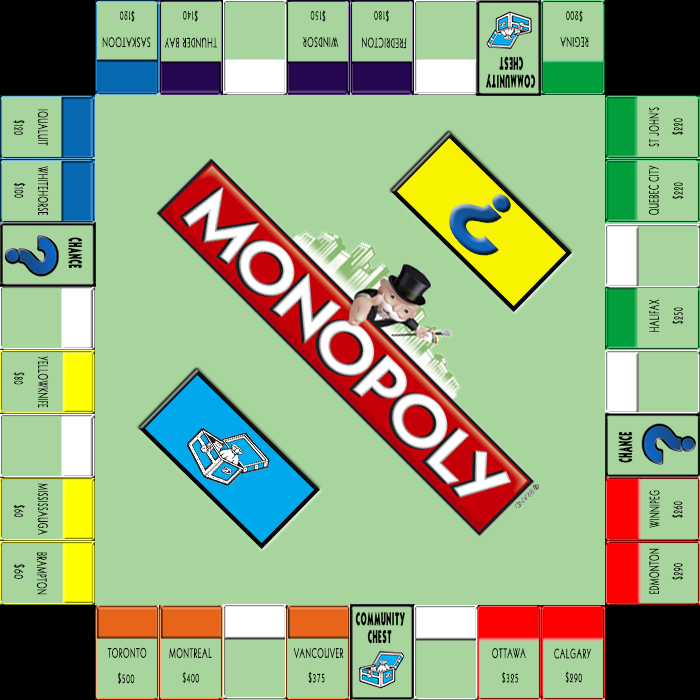
<style>
.page{position:relative;width:700px;height:700px;background:#a8d59d}
.page>*{position:absolute;margin:0}
.t1{font:13.1px "Kabel-Book";letter-spacing:0.1em;color:#000000;text-transform:uppercase;scale:0.56 1}
.t2{font:13.3px "Kabel-Book";letter-spacing:0.1em;color:#000000;text-transform:uppercase;scale:0.56 1}
.t3{font:13.4px "Kabel-Book";letter-spacing:0.1em;color:#000000;text-transform:uppercase;scale:0.56 1}
.t4{font:13.3px "Kabel-Book";letter-spacing:0.1em;color:#000000;text-transform:uppercase;scale:0.57 1}
.t5{font:13.1px "Kabel-Book";letter-spacing:0.1em;color:#000000;text-transform:uppercase;scale:0.57 1}
.t6{font:13.3px "Kabel-Book";letter-spacing:0.1em;color:#000000;text-transform:uppercase;scale:0.7 1}
</style>
<div class="page">
<p class="t1" style="left:120px;top:10px;width:15px;height:12px;rotate:-180deg">$120</p>
<p class="t2" style="left:183px;top:10px;width:15px;height:12px;rotate:-180deg">$140</p>
<p class="t2" style="left:310px;top:10px;width:16px;height:12px;rotate:180deg">$150</p>
<p class="t2" style="left:374px;top:10px;width:15px;height:12px;rotate:180deg">$180</p>
<p class="t2" style="left:566px;top:10px;width:17px;height:12px;rotate:180deg">$200</p>
<p class="t2" style="left:102px;top:37px;width:49px;height:11px;rotate:-180deg">Saskatoon</p>
<p class="t2" style="left:164px;top:37px;width:53px;height:11px;rotate:-180deg">Thunder Bay</p>
<p class="t2" style="left:303px;top:36px;width:36px;height:12px;rotate:180deg">Windsor</p>
<p class="t3" style="left:361px;top:37px;width:46px;height:12px;rotate:-179deg">Fredricton</p>
<p class="t2" style="left:560px;top:36px;width:29px;height:12px;rotate:180deg">Regina</p>
<p class="t2" style="left:37px;top:109px;width:11px;height:37px;rotate:90deg">Iqualuit</p>
<p class="t4" style="left:649px;top:107px;width:11px;height:40px;rotate:-90deg">St John's</p>
<p class="t2" style="left:13px;top:120px;width:12px;height:15px;rotate:90deg">$120</p>
<p class="t2" style="left:671px;top:118px;width:13px;height:17px;rotate:-90deg">$220</p>
<p class="t2" style="left:37px;top:166px;width:12px;height:50px;rotate:90deg">whitehorse</p>
<p class="t2" style="left:648px;top:165px;width:11px;height:50px;rotate:-90deg">Quebec City</p>
<p class="t2" style="left:13px;top:183px;width:13px;height:15px;rotate:90deg">$100</p>
<p class="t2" style="left:672px;top:182px;width:12px;height:17px;rotate:-90deg">$220</p>
<p class="t2" style="left:649px;top:299px;width:11px;height:33px;rotate:-90deg">Halifax</p>
<p class="t2" style="left:672px;top:307px;width:12px;height:17px;rotate:-90deg">$250</p>
<p class="t2" style="left:37px;top:356px;width:12px;height:52px;rotate:90deg">Yellowknife</p>
<p class="t2" style="left:13px;top:372px;width:12px;height:13px;rotate:90deg">$80</p>
<p class="t2" style="left:37px;top:483px;width:11px;height:52px;rotate:90deg">mississauga</p>
<p class="t2" style="left:649px;top:490px;width:11px;height:38px;rotate:-90deg">Winnipeg</p>
<p class="t2" style="left:13px;top:505px;width:12px;height:12px;rotate:90deg">$60</p>
<p class="t5" style="left:671px;top:501px;width:12px;height:17px;rotate:-90deg">$260</p>
<p class="t2" style="left:36px;top:552px;width:11px;height:43px;rotate:90deg">Brampton</p>
<p class="t2" style="left:649px;top:548px;width:11px;height:46px;rotate:-90deg">Edmonton</p>
<p class="t6" style="left:13px;top:564px;width:12px;height:15px;rotate:90deg">$60</p>
<p class="t2" style="left:671px;top:563px;width:13px;height:17px;rotate:-90deg">$290</p>
<p class="t2" style="left:107px;top:647px;width:40px;height:11px">Toronto</p>
<p class="t2" style="left:169px;top:648px;width:43px;height:11px">Montreal</p>
<p class="t2" style="left:293px;top:648px;width:51px;height:11px">Vancouver</p>
<p class="t2" style="left:492px;top:648px;width:34px;height:11px">Ottawa</p>
<p class="t2" style="left:554px;top:648px;width:37px;height:11px">Calgary</p>
<p class="t2" style="left:117px;top:672px;width:18px;height:12px">$500</p>
<p class="t2" style="left:182px;top:671px;width:17px;height:13px">$400</p>
<p class="t2" style="left:308px;top:671px;width:17px;height:13px">$375</p>
<p class="t2" style="left:502px;top:671px;width:17px;height:13px">$325</p>
<p class="t2" style="left:565px;top:671px;width:17px;height:12px">$290</p>
</div>
